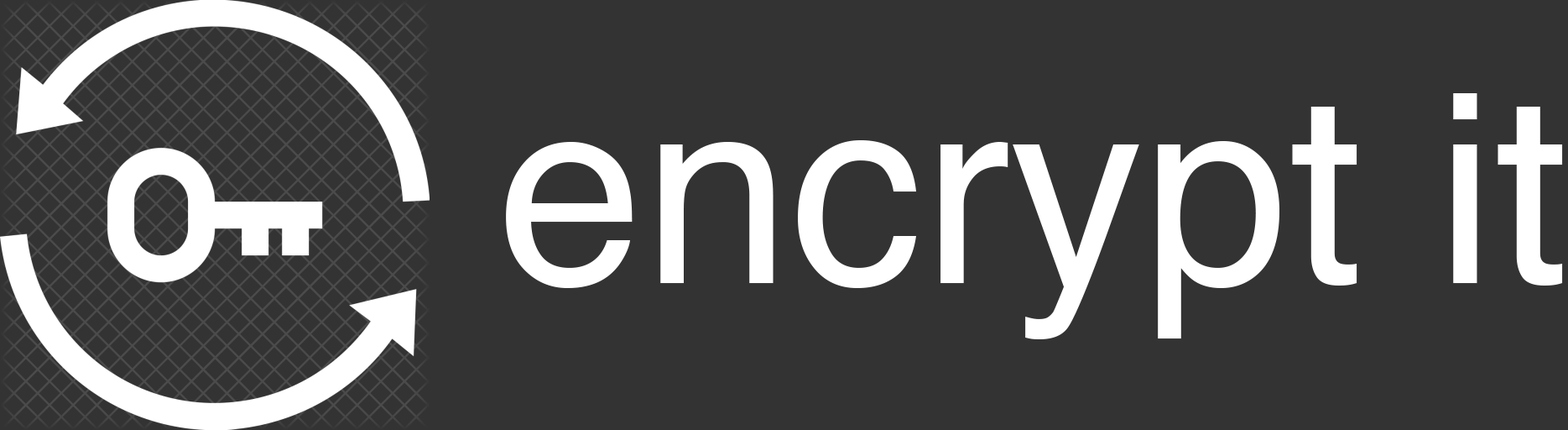
<style>
.page{position:relative;width:1568px;height:430px;background:#333333}
.page>*{position:absolute;margin:0}
.t1{font:264px "Helvetica";color:#ffffff}
</style>
<div class="page">
<p class="t1" style="left:506px;top:93px;width:1057px;height:246px">encrypt it</p>
</div>
